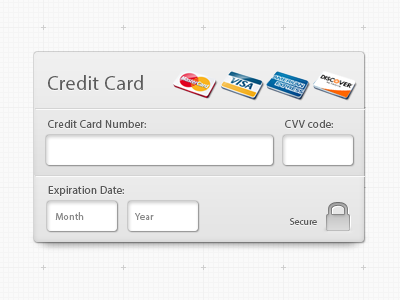
<style>
.page{position:relative;width:400px;height:300px;background:#fafafa}
.page>*{position:absolute;margin:0}
.t1{font:20px "MyriadPro-Regular";letter-spacing:0.025em;color:#5b5b5b}
.t2{font:11px "MyriadPro-Regular";letter-spacing:0.025em;color:#5b5b5b}
.t3{font:10px "MyriadPro-Regular";letter-spacing:0.025em;color:#8a8a8a}
.t4{font:9px "MyriadPro-Regular";letter-spacing:0.025em;color:#5b5b5b}
</style>
<div class="page">
<p class="t1" style="left:48px;top:75px;width:95px;height:15px">Credit Card</p>
<p class="t2" style="left:48px;top:120px;width:98px;height:8px">Credit Card Number:</p>
<p class="t2" style="left:285px;top:120px;width:48px;height:8px">CVV code:</p>
<p class="t2" style="left:48px;top:186px;width:76px;height:10px">Expiration Date:</p>
<p class="t3" style="left:55px;top:212px;width:29px;height:8px">Month</p>
<p class="t3" style="left:135px;top:213px;width:19px;height:7px">Year</p>
<p class="t4" style="left:290px;top:218px;width:27px;height:7px">Secure</p>
</div>
